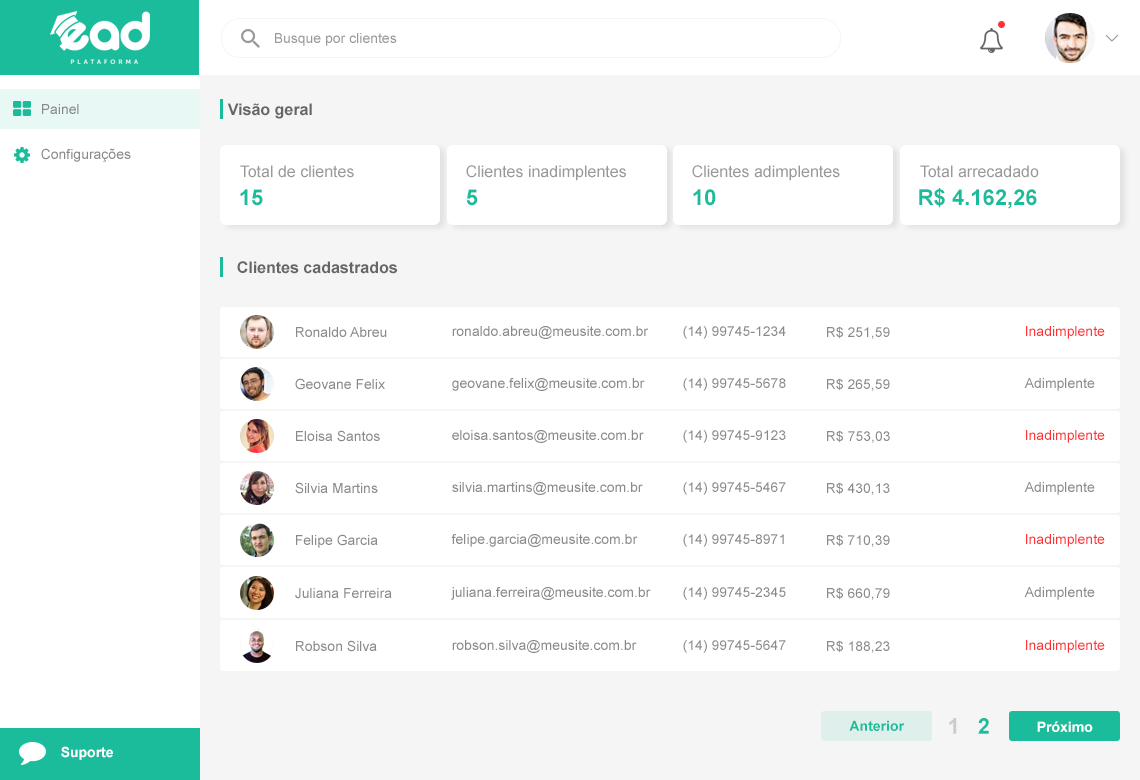
<style>
.page{position:relative;width:1140px;height:780px;background:#ffffff}
.page>*{position:absolute;margin:0}
.t1{font:14px "ArialMT";color:#999999}
.t2{font:14px "ArialMT";color:#8a8a8a}
.t3{font:16px "Arial-BoldMT";color:#666666}
.t4{font:16px "ArialMT";color:#999999}
.t5{font:22px "Arial-BoldMT";color:#1bbc9b}
.t6{font:14px "ArialMT";color:#ff3333}
.t7{font:14px "ArialMT"}
.t8{font:14px "Arial-BoldMT";color:#1bbc9b}
.t9{font:22px "Arial-BoldMT";color:#cccccc}
.t10{font:14px "Arial-BoldMT";color:#ffffff}
</style>
<div class="page">
<p class="t1" style="left:275px;top:33px;width:122px;height:13px">Busque por clientes</p>
<p class="t2" style="left:42px;top:104px;width:37px;height:10px">Painel</p>
<p class="t3" style="left:227px;top:103px;width:85px;height:16px">Visão geral</p>
<p class="t2" style="left:41px;top:148px;width:90px;height:14px">Configurações</p>
<p class="t4" style="left:240px;top:165px;width:114px;height:13px">Total de clientes</p>
<p class="t4" style="left:466px;top:165px;width:160px;height:16px">Clientes inadimplentes</p>
<p class="t4" style="left:692px;top:165px;width:148px;height:16px">Clientes adimplentes</p>
<p class="t4" style="left:920px;top:165px;width:119px;height:13px">Total arrecadado</p>
<p class="t5" style="left:240px;top:189px;width:23px;height:17px">15</p>
<p class="t5" style="left:466px;top:189px;width:12px;height:17px">5</p>
<p class="t5" style="left:693px;top:189px;width:23px;height:17px">10</p>
<p class="t5" style="left:919px;top:188px;width:118px;height:21px">R$ 4.162,26</p>
<p class="t3" style="left:237px;top:261px;width:160px;height:13px">Clientes cadastrados</p>
<p class="t2" style="left:296px;top:327px;width:91px;height:10px">Ronaldo Abreu</p>
<p class="t2" style="left:452px;top:326px;width:197px;height:13px">ronaldo.abreu@meusite.com.br</p>
<p class="t2" style="left:683px;top:326px;width:103px;height:13px">(14) 99745-1234</p>
<p class="t2" style="left:827px;top:326px;width:63px;height:13px">R$ 251,59</p>
<p class="t6" style="left:1026px;top:326px;width:79px;height:13px">Inadimplente</p>
<p class="t2" style="left:295px;top:378px;width:90px;height:12px">Geovane Felix</p>
<p class="t2" style="left:452px;top:378px;width:193px;height:13px">geovane.felix@meusite.com.br</p>
<p class="t2" style="left:683px;top:378px;width:103px;height:13px">(14) 99745-5678</p>
<p class="t2" style="left:827px;top:378px;width:63px;height:13px">R$ 265,59</p>
<p class="t2" style="left:1024px;top:378px;width:71px;height:13px">Adimplente</p>
<p class="t2" style="left:296px;top:430px;width:84px;height:12px">Eloisa Santos</p>
<p class="t2" style="left:452px;top:430px;width:192px;height:13px">eloisa.santos@meusite.com.br</p>
<p class="t2" style="left:683px;top:430px;width:103px;height:13px">(14) 99745-9123</p>
<p class="t2" style="left:827px;top:430px;width:63px;height:13px">R$ 753,03</p>
<p class="t6" style="left:1026px;top:430px;width:79px;height:13px">Inadimplente</p>
<p class="t2" style="left:295px;top:482px;width:83px;height:12px">Silvia Martins</p>
<p class="t2" style="left:452px;top:482px;width:191px;height:13px">silvia.martins@meusite.com.br</p>
<p class="t2" style="left:683px;top:482px;width:103px;height:13px">(14) 99745-5467</p>
<p class="t2" style="left:827px;top:482px;width:63px;height:13px">R$ 430,13</p>
<p class="t2" style="left:1024px;top:482px;width:71px;height:13px">Adimplente</p>
<p class="t2" style="left:296px;top:534px;width:82px;height:14px">Felipe Garcia</p>
<p class="t2" style="left:451px;top:534px;width:187px;height:13px">felipe.garcia@meusite.com.br</p>
<p class="t2" style="left:683px;top:534px;width:101px;height:13px">(14) 99745-8971</p>
<p class="t2" style="left:827px;top:534px;width:63px;height:13px">R$ 710,39</p>
<p class="t6" style="left:1026px;top:534px;width:79px;height:13px">Inadimplente</p>
<p class="t7" style="left:295px;top:587px;width:97px;height:11px">Juliana Ferreira</p>
<p class="t2" style="left:295px;top:588px;width:97px;height:11px">Juliana Ferreira</p>
<p class="t7" style="left:451px;top:586px;width:200px;height:13px">juliana.ferreira@meusite.com.br</p>
<p class="t2" style="left:451px;top:587px;width:200px;height:13px">juliana.ferreira@meusite.com.br</p>
<p class="t7" style="left:683px;top:586px;width:103px;height:13px">(14) 99745-2345</p>
<p class="t2" style="left:683px;top:587px;width:103px;height:13px">(14) 99745-2345</p>
<p class="t7" style="left:827px;top:586px;width:63px;height:13px">R$ 660,79</p>
<p class="t2" style="left:827px;top:587px;width:63px;height:13px">R$ 660,79</p>
<p class="t7" style="left:1024px;top:586px;width:71px;height:13px">Adimplente</p>
<p class="t2" style="left:1024px;top:587px;width:71px;height:13px">Adimplente</p>
<p class="t7" style="left:296px;top:639px;width:81px;height:12px">Robson Silva</p>
<p class="t2" style="left:296px;top:640px;width:81px;height:12px">Robson Silva</p>
<p class="t7" style="left:452px;top:639px;width:185px;height:13px">robson.silva@meusite.com.br</p>
<p class="t2" style="left:452px;top:640px;width:185px;height:13px">robson.silva@meusite.com.br</p>
<p class="t7" style="left:683px;top:639px;width:103px;height:13px">(14) 99745-5647</p>
<p class="t2" style="left:683px;top:640px;width:103px;height:13px">(14) 99745-5647</p>
<p class="t7" style="left:827px;top:639px;width:63px;height:13px">R$ 188,23</p>
<p class="t2" style="left:827px;top:640px;width:63px;height:13px">R$ 188,23</p>
<p class="t6" style="left:1026px;top:640px;width:79px;height:13px">Inadimplente</p>
<p class="t8" style="left:849px;top:720px;width:56px;height:11px">Anterior</p>
<p class="t9" style="left:949px;top:718px;width:8px;height:16px">1</p>
<p class="t5" style="left:978px;top:718px;width:11px;height:16px">2</p>
<p class="t10" style="left:1037px;top:721px;width:56px;height:11px">Próximo</p>
<p class="t10" style="left:61px;top:746px;width:52px;height:14px">Suporte</p>
</div>
